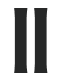
<style>
.page{position:relative;width:60px;height:80px;background:#ffffff}
.page>*{position:absolute;margin:0}
.t1{font:100px "ARESSENCE";color:#272828}
</style>
<div class="page">
<p class="t1" style="left:14px;top:8px;width:34px;height:65px">II</p>
</div>
